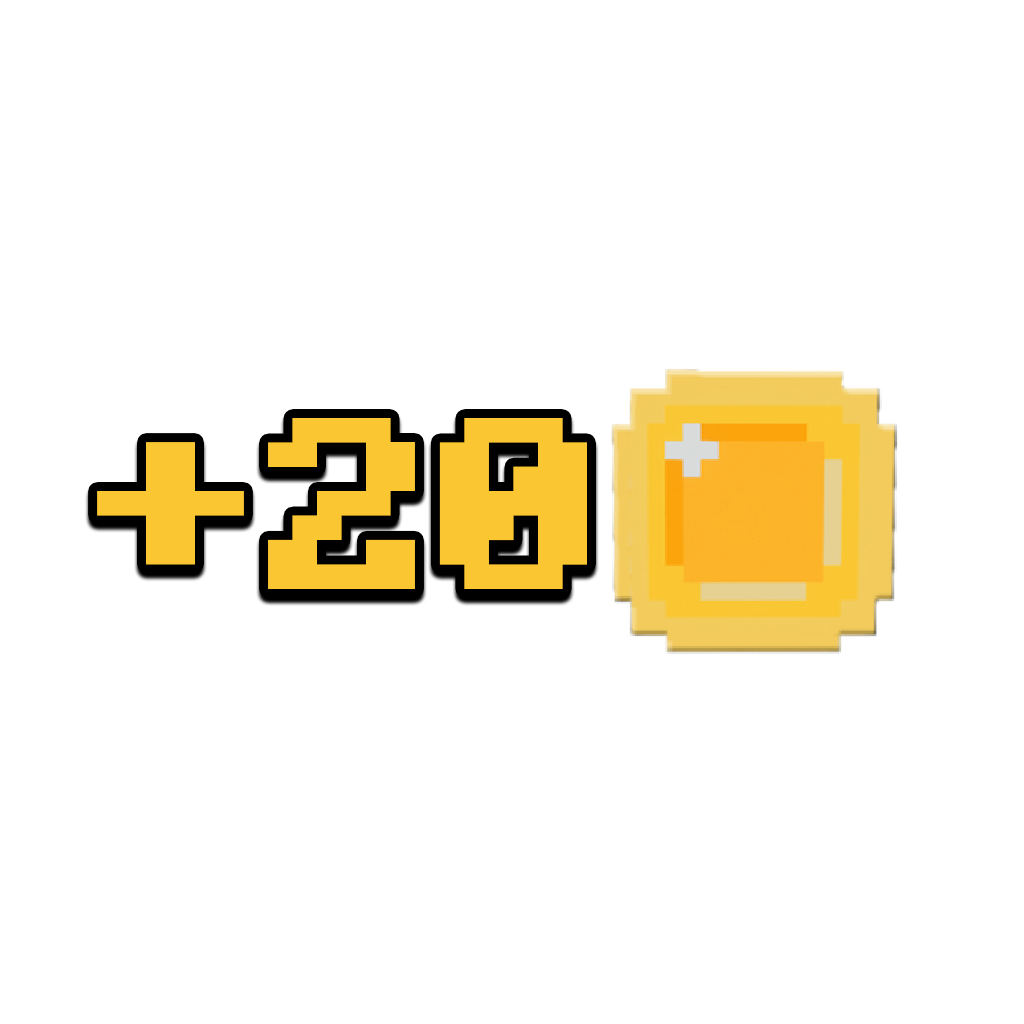
<style>
.page{position:relative;width:1024px;height:1024px;background:#ffffff}
.page>*{position:absolute;margin:0}
.t1{font:244.5px "Minecraft-Bold";color:#fac733}
</style>
<div class="page">
<p class="t1" style="left:97px;top:418px;width:490px;height:171px">+20</p>
</div>
